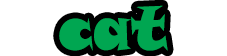
<style>
.page{position:relative;width:227px;height:56px;background:#ffffff}
.page>*{position:absolute;margin:0}
.t1{font:60px "SnapITC-Regular";color:#00a651}
</style>
<div class="page">
<p class="t1" style="left:59px;top:5px;width:109px;height:46px">cat</p>
</div>
